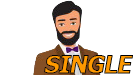
<style>
.page{position:relative;width:135px;height:75px;background:#ffffff}
.page>*{position:absolute;margin:0}
.t1{font:24px "Tahoma-Bold";letter-spacing:-0.065em;font-weight:bold;font-style:italic}
</style>
<div class="page">
<p class="t1" style="left:44px;top:55px;width:89px;height:19px">SINGLE</p>
</div>
